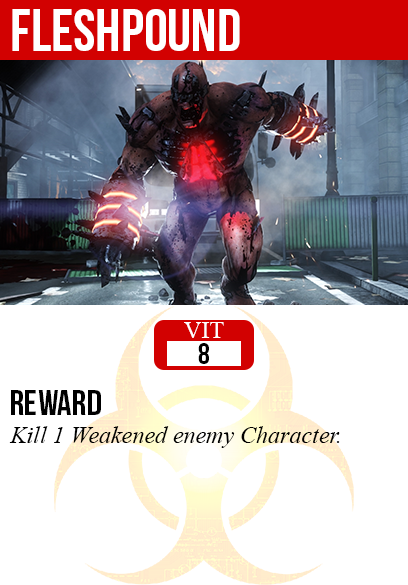
<style>
.page{position:relative;width:408px;height:585px;background:#ffffff}
.page>*{position:absolute;margin:0}
.t1{font:60px "BebasNeue";color:#ffffff}
.t2{font:24px "TimesNewRomanPSMT";color:#ffffff}
.t3{font:30px "BebasNeue";color:#000000}
.t4{font:36px "BebasNeue";color:#000000}
.t5{font:24px "TimesNewRomanPS-ItalicMT";color:#000000}
</style>
<div class="page">
<p class="t1" style="left:12px;top:9px;width:228px;height:42px">fleshpound</p>
<p class="t2" style="left:184px;top:322px;width:40px;height:16px">VIT</p>
<p class="t3" style="left:198px;top:343px;width:11px;height:21px">8</p>
<p class="t4" style="left:11px;top:390px;width:90px;height:25px">reward</p>
<p class="t5" style="left:9px;top:426px;width:331px;height:22px">Kill 1 Weakened enemy Character.</p>
</div>
